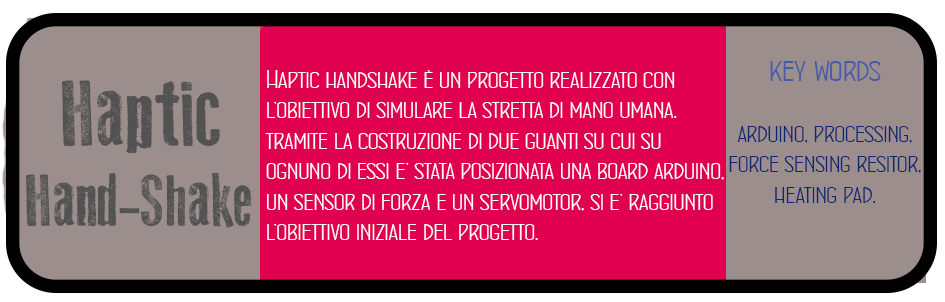
<style>
.page{position:relative;width:945px;height:302px;background:#e0004f}
.page>*{position:absolute;margin:0}
.t1{font:25.3px "ConcursoItalianBTNWide";color:#112672}
.t2{font:32px "ConcursoItalianBTNWide";color:#455baa}
.t3{font:26.7px "ConcursoItalianBTNWide";color:#112672}
.t4{font:25.3px "ConcursoItalianBTNWide";color:#ffffff}
.t5{font:93.3px "OldPress";color:#525252}
.t6{font:73.3px "OldPress";color:#525252}
</style>
<div class="page">
<p class="t1" style="left:729px;top:61px;width:192px;height:142px;text-align:center"><span class="t2">key words<br></span><br>arduino, processing,<br>force sensing resitor,<br>heating pad.<br><span class="t3"></span></p>
<p class="t4" style="left:265px;top:70px;width:459px;height:170px">Haptic handshake è un progetto realizzato con <br>l’obiettivo di simulare la stretta di mano umana.<br>tramite la costruzione di due guanti su cui su<br>ognuno di essi e’ stata posizionata una board arduino,<br>un sensor di forza e un servomotor, si e’ raggiunto <br>l’obiettivo iniziale del progetto.</p>
<p class="t5" style="left:61px;top:80px;width:159px;height:74px">Haptic</p>
<p class="t6" style="left:25px;top:172px;width:228px;height:56px">Hand-Shake</p>
</div>
